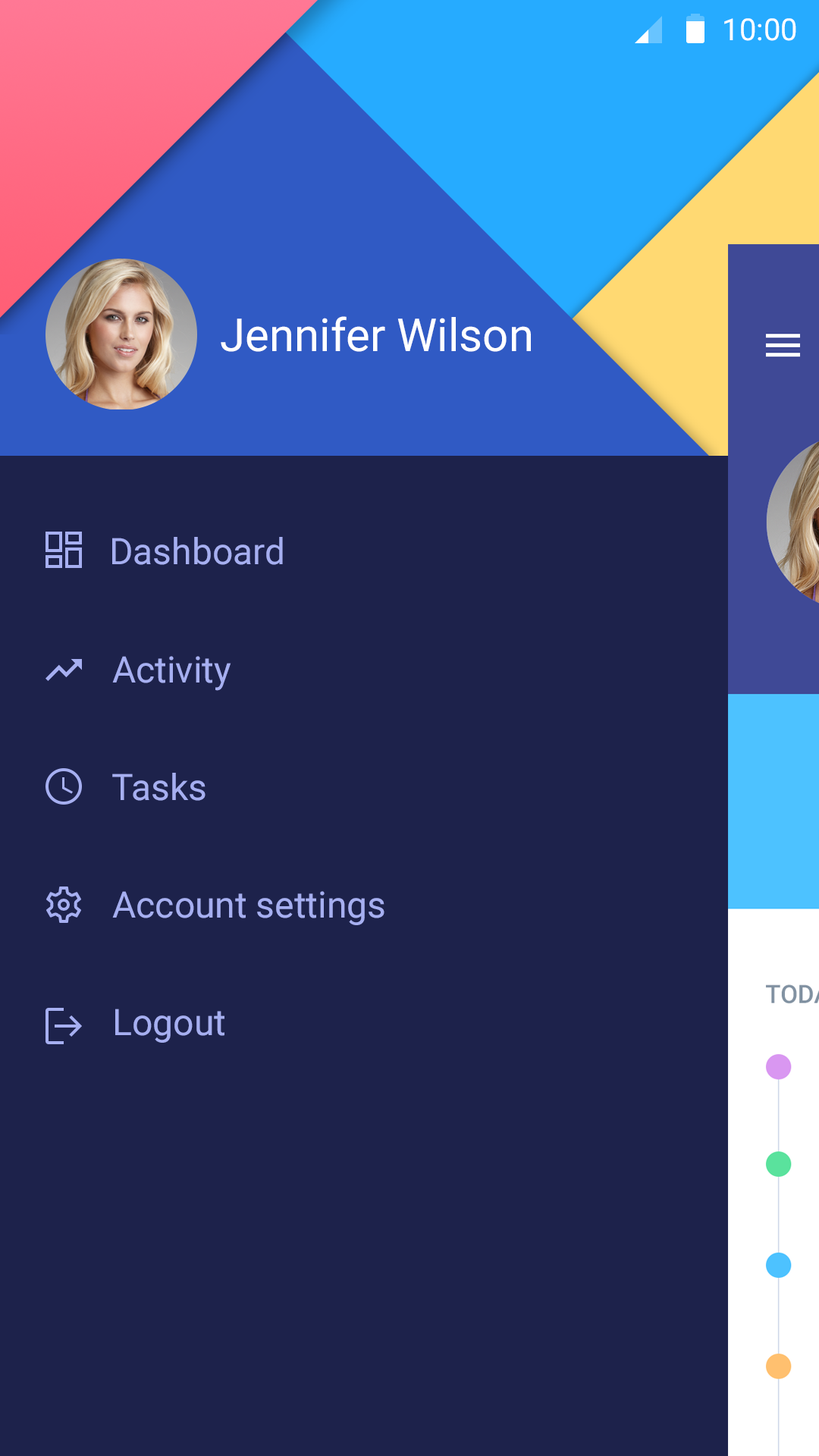
<style>
.page{position:relative;width:819px;height:1456px;background:#1d224b}
.page>*{position:absolute;margin:0}
.t1{font:30.3px "Roboto-Regular";color:#ffffff}
.t2{font:45.5px "Roboto-Regular";color:#ffffff}
.t3{font:36.4px "Roboto-Regular";color:#a6aff1}
</style>
<div class="page">
<p class="t1" style="left:724px;top:18px;width:72px;height:23px">10:00</p>
<p class="t2" style="left:221px;top:316px;width:310px;height:36px">Jennifer Wilson</p>
<p class="t3" style="left:112px;top:537px;width:171px;height:28px">Dashboard</p>
<p class="t3" style="left:112px;top:656px;width:119px;height:35px">Activity</p>
<p class="t3" style="left:112px;top:773px;width:94px;height:28px">Tasks</p>
<p class="t3" style="left:112px;top:891px;width:272px;height:34px">Account settings</p>
<p class="t3" style="left:115px;top:1009px;width:109px;height:34px">Logout</p>
</div>
